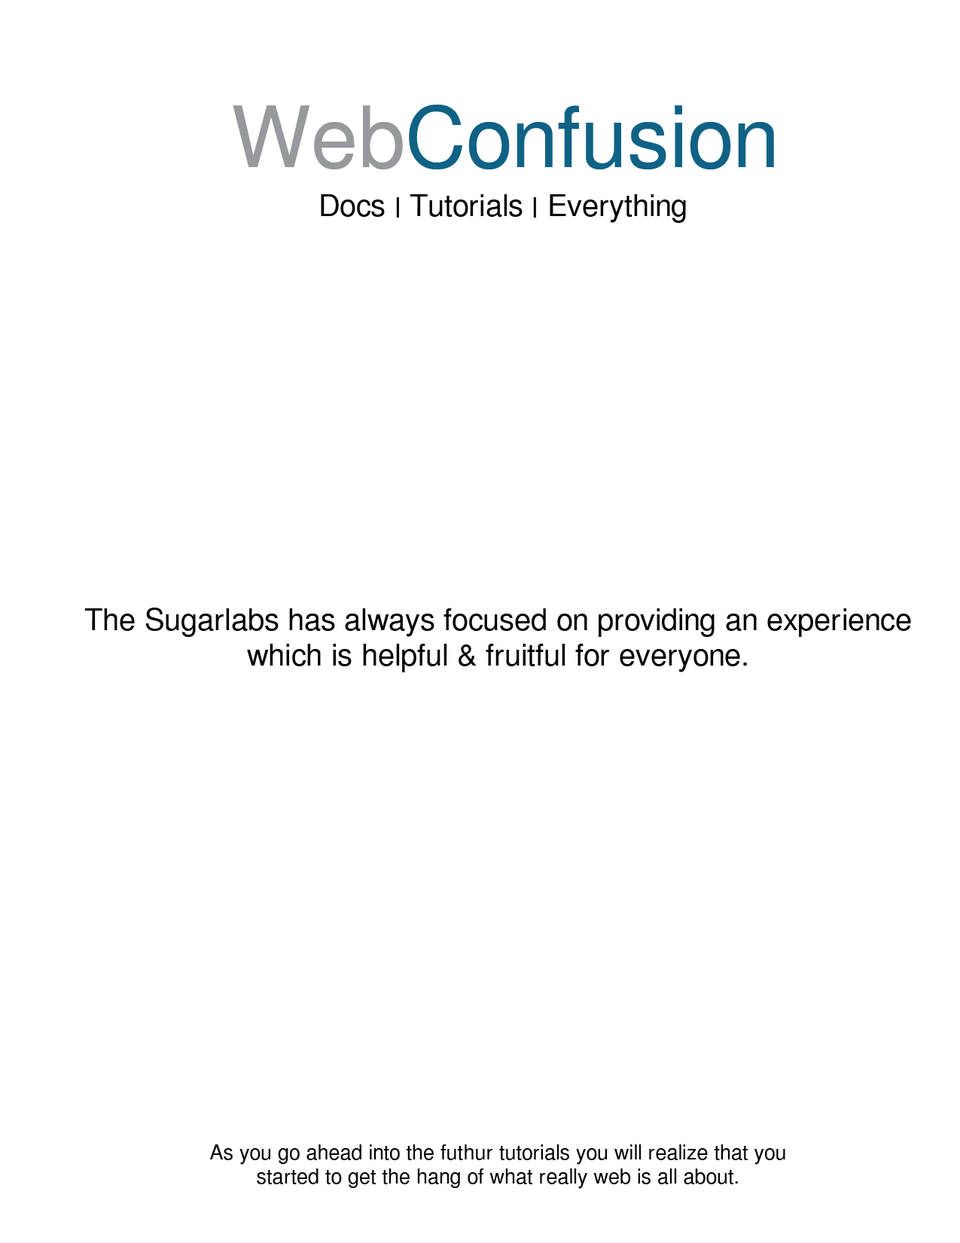
<style>
.page{position:relative;width:960px;height:1243px;background:#ffffff}
.page>*{position:absolute;margin:0}
.t1{font:84.6px "PhetsarathOT";color:#0f6285}
.t2{font:84.6px "PhetsarathOT";color:#97999d}
.t3{font:29.8px "PhetsarathOT";color:#000000}
.t4{font:20.4px "PhetsarathOT";color:#000000}
</style>
<div class="page">
<p class="t1" style="left:233px;top:105px;width:541px;height:64px"><span class="t2">Web</span>Confusion</p>
<p class="t3" style="left:321px;top:194px;width:365px;height:29px">Docs | Tutorials | Everything</p>
<p class="t3" style="left:84px;top:607px;width:827px;height:65px;text-align:center">The Sugarlabs has always focused on providing an experience<br>which is helpful &amp; fruitful for everyone.</p>
<p class="t4" style="left:209px;top:1144px;width:576px;height:44px;text-align:center">As you go ahead into the futhur tutorials you will realize that you<br>started to get the hang of what really web is all about.</p>
</div>
